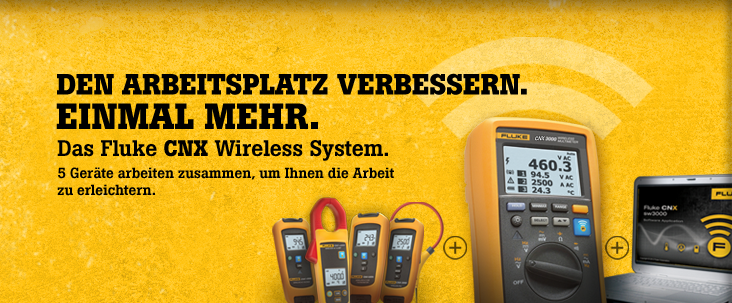
<style>
.page{position:relative;width:732px;height:303px}
.page>*{position:absolute;margin:0}
.t1{font:29px "BotonPro-Bold";letter-spacing:-0.005em;color:#000000;text-transform:uppercase}
.t2{font:36px "BotonPro-Bold";letter-spacing:-0.005em;color:#000000;text-transform:uppercase}
.t3{font:14.5px "BotonPro-Medium";letter-spacing:-0.01em;color:#000000}
.t4{font:22.4px "BotonPro-Medium";letter-spacing:-0.01em;color:#000000}
.t5{font:22.4px "BotonPro-Bold";letter-spacing:-0.01em;color:#000000}
</style>
<div class="page">
<p class="t1" style="left:57px;top:73px;width:470px;height:22px">Den Arbeitsplatz verbessern.</p>
<p class="t2" style="left:56px;top:103px;width:262px;height:26px">Einmal mehr.</p>
<p class="t3" style="left:57px;top:140px;width:337px;height:56px"><span class="t4">Das Fluke </span><span class="t5">CNX</span><span class="t4"> Wireless System.<br></span>5 Geräte arbeiten zusammen, um Ihnen die Arbeit zu erleichtern.</p>
</div>
